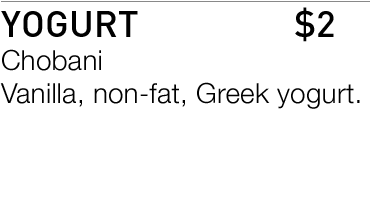
<style>
.page{position:relative;width:372px;height:200px;background:#ffffff}
.page>*{position:absolute;margin:0}
.t1{font:27.8px "HelveticaNeue-Light";letter-spacing:0.01em;color:#000000}
.t2{font:36.5px "DIN-Medium";letter-spacing:0.01em;color:#000000}
</style>
<div class="page">
<p class="t1" style="left:0px;top:11px;width:360px;height:98px"><span class="t2">YOGURT<br></span>Chobani<br>Vanilla, non-fat, Greek yogurt.</p>
<p class="t2" style="left:295px;top:7px;width:39px;height:35px">$2</p>
</div>
